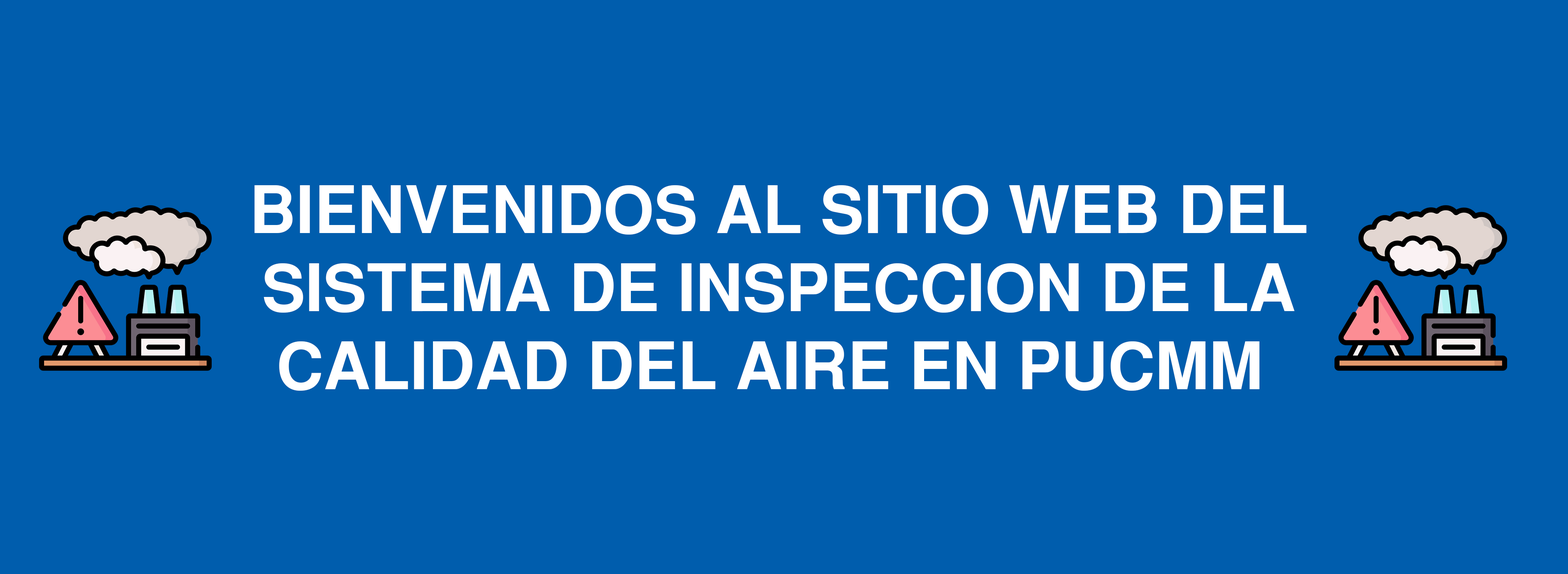
<style>
.page{position:relative;width:1568px;height:574px;background:#005dad}
.page>*{position:absolute;margin:0}
.t1{font:65.1px "SansSerifBold";color:#ffffff}
</style>
<div class="page">
<p class="t1" style="left:254px;top:185px;width:1053px;height:206px;text-align:center">BIENVENIDOS AL SITIO WEB DEL<br>SISTEMA DE INSPECCION DE LA<br>CALIDAD DEL AIRE EN PUCMM</p>
</div>
